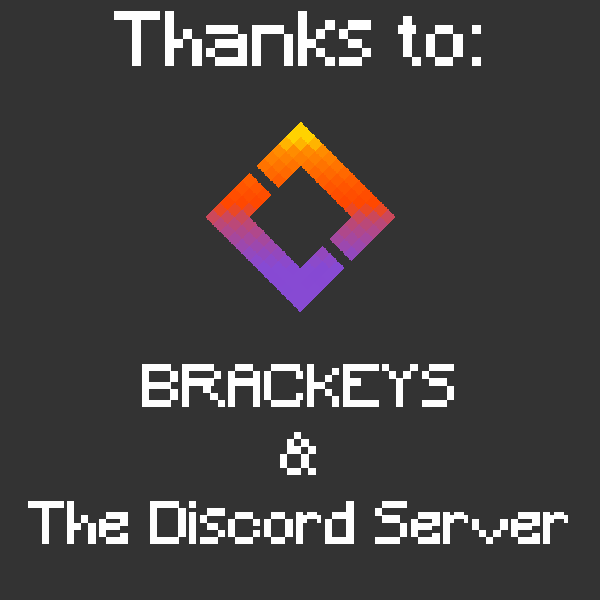
<style>
.page{position:relative;width:600px;height:600px;background:#333333}
.page>*{position:absolute;margin:0}
.t1{font:73.3px "Minecraft";color:#ffffff}
.t2{font:57.3px "Minecraft";color:#ffffff}
</style>
<div class="page">
<p class="t1" style="left:114px;top:11px;width:367px;height:55px">Thanks to:</p>
<p class="t2" style="left:28px;top:364px;width:540px;height:180px;text-align:center">BRACKEYS <br>&amp;<br>The Discord Server</p>
</div>
